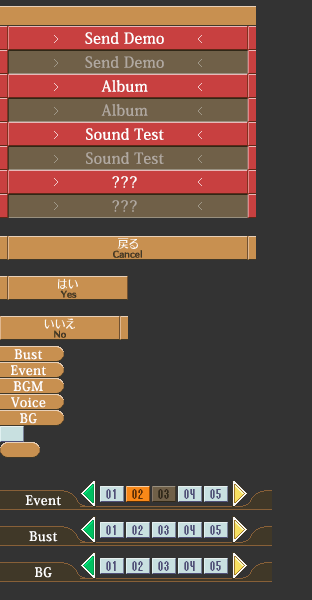
<style>
.page{position:relative;width:312px;height:600px;background:#333333}
.page>*{position:absolute;margin:0}
.t1{font:15px/24px "KozMinPro-Medium";letter-spacing:0.025em;color:#ffffff}
.t2{font:15px/24px "KozMinPro-Medium";letter-spacing:0.025em;color:#b0a8a0}
.t3{font:15px/24px "KozMinPro-Medium";letter-spacing:0.1em;color:#ffffff}
.t4{font:15px/24px "KozMinPro-Medium";letter-spacing:0.1em;color:#b0a8a0}
.t5{font:13px/16px "KozMinPro-Medium";letter-spacing:0.05em;color:#ffffff}
.t6{font:13px/36px "KozMinPro-Medium";letter-spacing:0.05em;color:#ffffff}
</style>
<div class="page">
<p class="t1" style="left:85px;top:32px;width:79px;height:180px;text-align:center">Send Demo<br><span class="t2">Send Demo<br></span>Album<br><span class="t2">Album<br></span>Sound Test<br><span class="t2">Sound Test<br></span><span class="t3">???<br></span><span class="t4">???</span></p>
<p class="t5" style="left:11px;top:349px;width:35px;height:75px;text-align:center">Bust<br>Event<br>BGM<br>Voice<br>BG</p>
<p class="t6" style="left:25px;top:495px;width:36px;height:83px;text-align:center">Event<br>Bust<br>BG</p>
</div>
